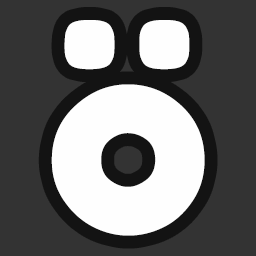
<style>
.page{position:relative;width:256px;height:256px;background:#333333}
.page>*{position:absolute;margin:0}
.t1{font:275.6px "FredokaOne-Regular";color:#fefefe}
</style>
<div class="page">
<p class="t1" style="left:51px;top:20px;width:154px;height:216px">ö</p>
</div>
